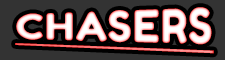
<style>
.page{position:relative;width:225px;height:60px;background:#333333}
.page>*{position:absolute;margin:0}
.t1{font:41.7px "FredokaOne-Regular";letter-spacing:0.03em;text-transform:uppercase;text-decoration:underline}
</style>
<div class="page">
<p class="t1" style="left:15px;top:7px;width:199px;height:47px">Chasers</p>
</div>
